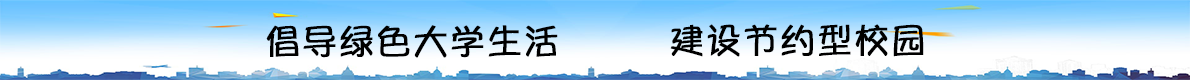
<style>
.page{position:relative;width:1190px;height:80px}
.page>*{position:absolute;margin:0}
.t1{font:36px "YuppySC-Regular";color:#000000;font-weight:bold}
</style>
<div class="page">
<p class="t1" style="left:266px;top:25px;width:292px;height:33px">倡导绿色大学生活</p>
<p class="t1" style="left:670px;top:24px;width:254px;height:33px">建设节约型校园</p>
</div>
